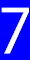
<style>
.page{position:relative;width:30px;height:60px;background:#0000ff}
.page>*{position:absolute;margin:0}
.t1{font:60.7px "KozGoPr6N-Regular";color:#ffffff}
</style>
<div class="page">
<p class="t1" style="left:1px;top:7px;width:28px;height:47px">7</p>
</div>
